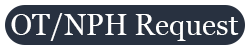
<style>
.page{position:relative;width:250px;height:50px;background:#283140}
.page>*{position:absolute;margin:0}
.t1{font:29.1px "Georgia";color:#ffffff}
</style>
<div class="page">
<p class="t1" style="left:11px;top:13px;width:228px;height:28px">OT/NPH Request</p>
</div>
